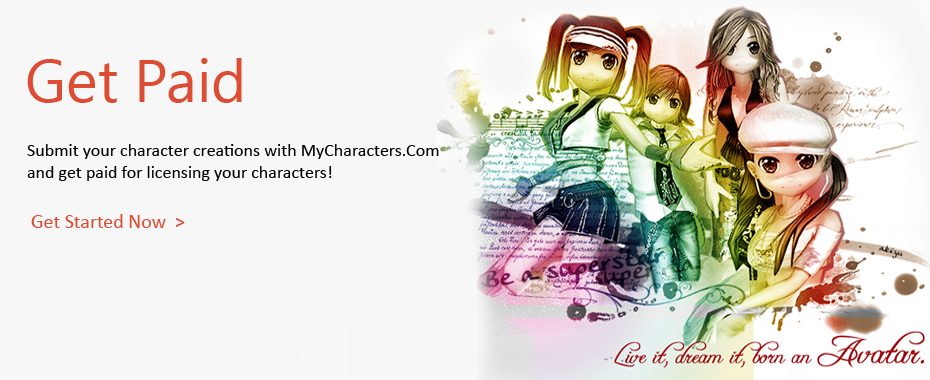
<style>
.page{position:relative;width:930px;height:380px;background:#f7f7f7}
.page>*{position:absolute;margin:0}
.t1{font:60px "KhmerUI";color:#dd4d33}
.t2{font:18px "Calibri";color:#000000}
.t3{font:20px "Calibri";color:#dd4d33}
</style>
<div class="page">
<p class="t1" style="left:27px;top:58px;width:215px;height:45px">Get Paid</p>
<p class="t2" style="left:27px;top:144px;width:412px;height:37px">Submit your character creations with MyCharacters.Com <br>and get paid for licensing your characters!</p>
<p class="t3" style="left:31px;top:214px;width:154px;height:14px">Get Started Now  &gt;</p>
</div>
